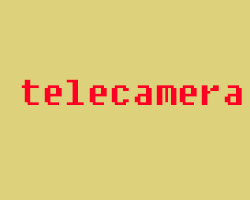
<style>
.page{position:relative;width:250px;height:200px;background:#ddd17b}
.page>*{position:absolute;margin:0}
.t1{font:36px "Fixedsys";color:#ff0024}
</style>
<div class="page">
<p class="t1" style="left:21px;top:79px;width:221px;height:26px">telecamera</p>
</div>
